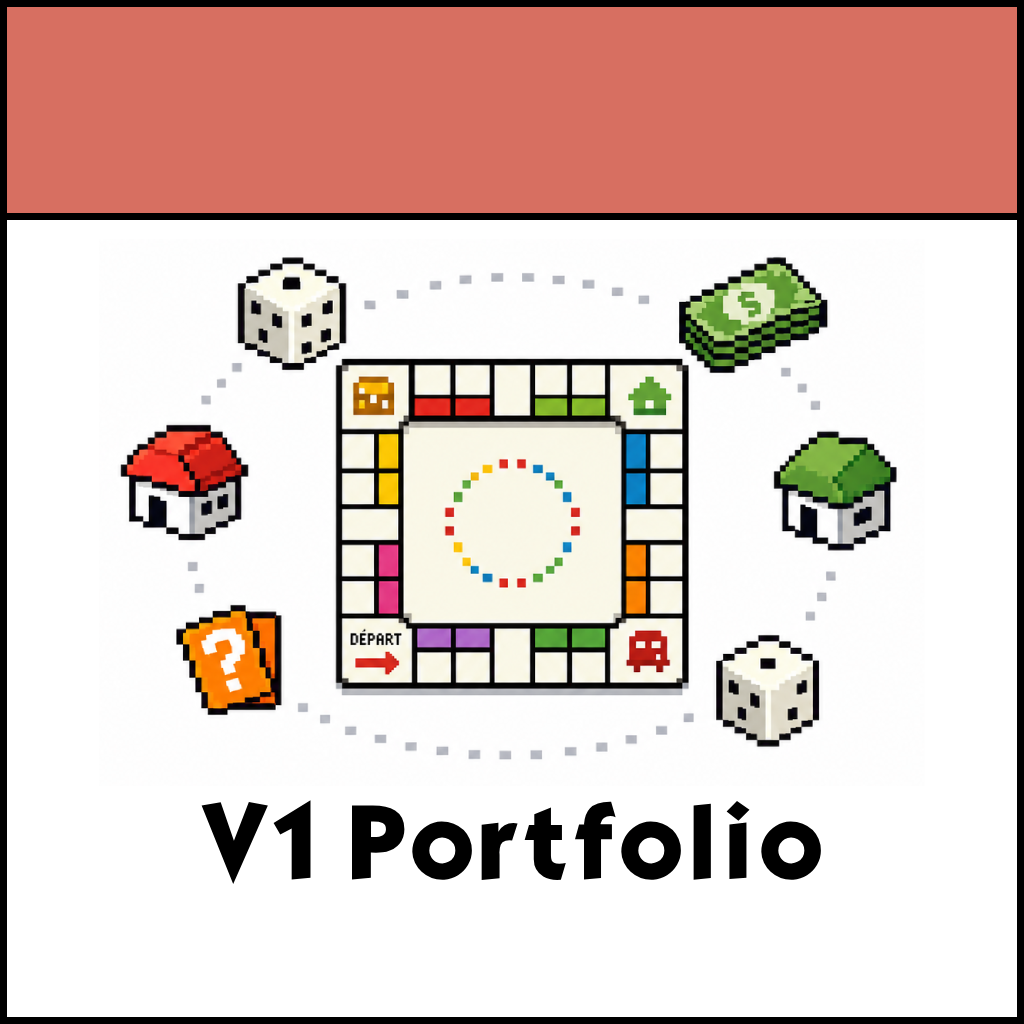
<style>
.page{position:relative;width:1024px;height:1024px;background:#ffffff}
.page>*{position:absolute;margin:0}
.t1{font:90px "KabelBdNormal";color:#000000}
</style>
<div class="page">
<p class="t1" style="left:201px;top:800px;width:620px;height:84px">V1 Portfolio</p>
</div>
